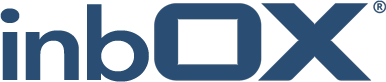
<style>
.page{position:relative;width:386px;height:82px;background:#ffffff}
.page>*{position:absolute;margin:0}
.t1{font:100px "AvenirNext-DemiBold";letter-spacing:-0.075em;color:#294d73;scale:1.2 1}
</style>
<div class="page">
<p class="t1" style="left:0px;top:4px;width:149px;height:78px">inb</p>
</div>
